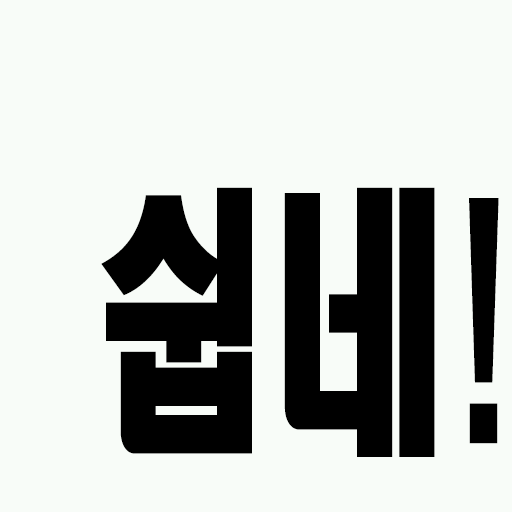
<style>
.page{position:relative;width:512px;height:512px;background:#f8fcf8}
.page>*{position:absolute;margin:0}
.t1{font:280px "HeadlineR-HM";color:#000000;scale:0.64 1}
</style>
<div class="page">
<p class="t1" style="left:101px;top:187px;width:398px;height:270px">쉽네!</p>
</div>
